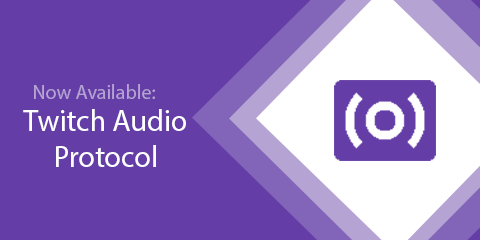
<style>
.page{position:relative;width:480px;height:240px;background:#643da7}
.page>*{position:absolute;margin:0}
.t1{font:20px "MyriadPro-Regular";color:#b5a3d3}
.t2{font:30px "MyriadPro-Regular";color:#ffffff}
</style>
<div class="page">
<p class="t1" style="left:34px;top:84px;width:121px;height:15px">Now Available:</p>
<p class="t2" style="left:23px;top:109px;width:163px;height:58px;text-align:center">Twitch Audio Protocol</p>
</div>
